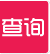
<style>
.page{position:relative;width:50px;height:54px;background:#eb1b51}
.page>*{position:absolute;margin:0}
.t1{font:22.1px "TRENDS";color:#ffffff}
</style>
<div class="page">
<p class="t1" style="left:2px;top:18px;width:42px;height:19px">查询</p>
</div>
